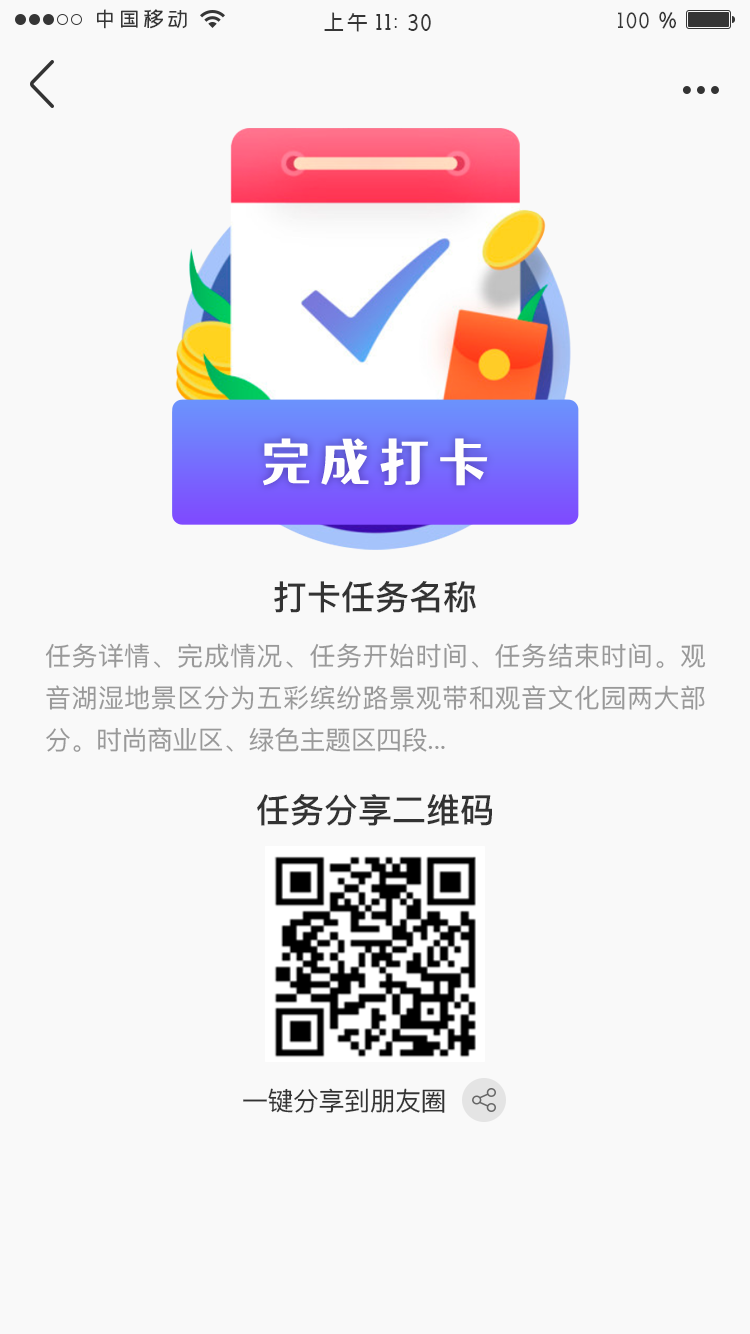
<style>
.page{position:relative;width:750px;height:1334px;background:#f9f9f9}
.page>*{position:absolute;margin:0}
.t1{font:49.3px "TsangerYuYangT-W05";letter-spacing:0.2em;color:#fffefe;text-transform:uppercase}
.t2{font:34px "PingFang-SC-Bold";color:#333333}
.t3{font:26px/42px "PingFang-SC-Medium";letter-spacing:-0.02em;color:#999999}
.t4{font:26px "PingFang-SC-Medium";letter-spacing:-0.02em;color:#333333}
</style>
<div class="page">
<p class="t1" style="left:263px;top:438px;width:225px;height:48px">完成打卡</p>
<p class="t2" style="left:274px;top:581px;width:202px;height:32px">打卡任务名称</p>
<p class="t3" style="left:45px;top:643px;width:661px;height:109px;text-align:justify">任务详情、完成情况、任务开始时间、任务结束时间。观音湖湿地景区分为五彩缤纷路景观带和观音文化园两大部分。时尚商业区、绿色主题区四段...</p>
<p class="t2" style="left:257px;top:794px;width:235px;height:32px">任务分享二维码</p>
<p class="t4" style="left:243px;top:1088px;width:202px;height:25px">一键分享到朋友圈</p>
</div>
